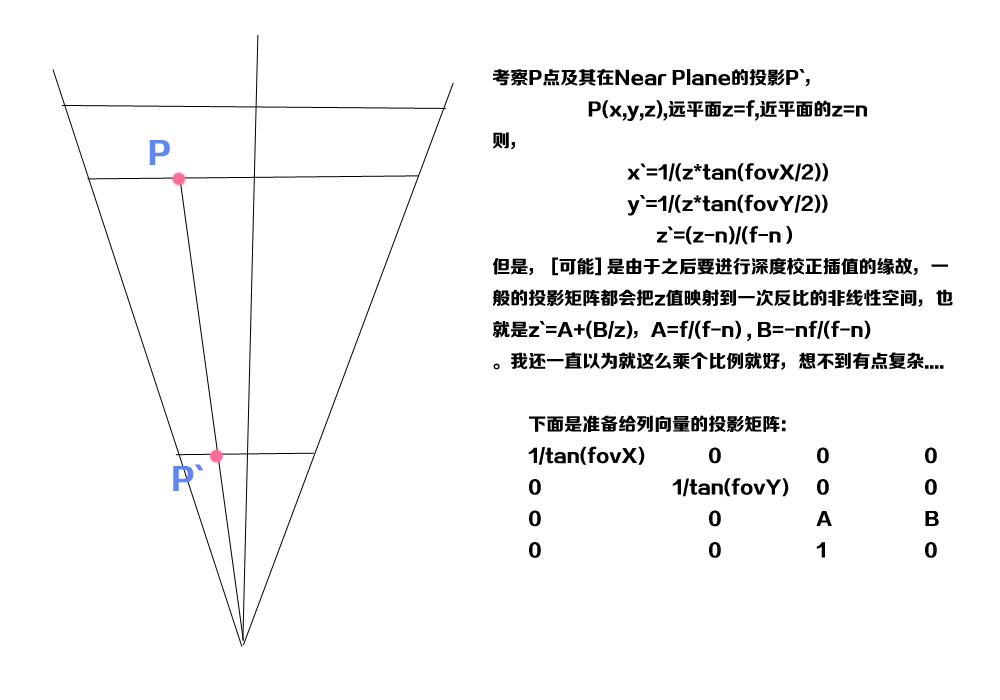
<style>
.page{position:relative;width:1000px;height:700px;background:#ffffff}
.page>*{position:absolute;margin:0}
.t1{font:18px "FZZDHJW--GB1-0";color:#000000}
.t2{font:30px "FZZDHJW--GB1-0";color:#6186ef}
</style>
<div class="page">
<p class="t1" style="left:493px;top:69px;width:460px;height:489px">考察P点及其在Near Plane的投影P`，<br>P(x,y,z),远平面z=f,近平面的z=n<br>则，<br>x`=1/(z*tan(fovX/2))<br>y`=1/(z*tan(fovY/2))<br>z`=(z-n)/(f-n）<br>但是， [可能] 是由于之后要进行深度校正插值的缘故，一般的投影矩阵都会把z值映射到一次反比的非线性空间，也就是z`=A+(B/z)，A=f/(f-n) , B=-nf/(f-n)<br>。我还一直以为就这么乘个比例就好，想不到有点复杂....<br><br> 下面是准备给列向量的投影矩阵：<br> 1/tan(fovX)  0    0    0<br> 0    1/tan(fovY) 0   0<br> 0     0   A   B<br> 0     0   1   0</p>
<p class="t2" style="left:149px;top:140px;width:21px;height:25px">P</p>
<p class="t2" style="left:173px;top:464px;width:31px;height:27px">P`</p>
</div>
